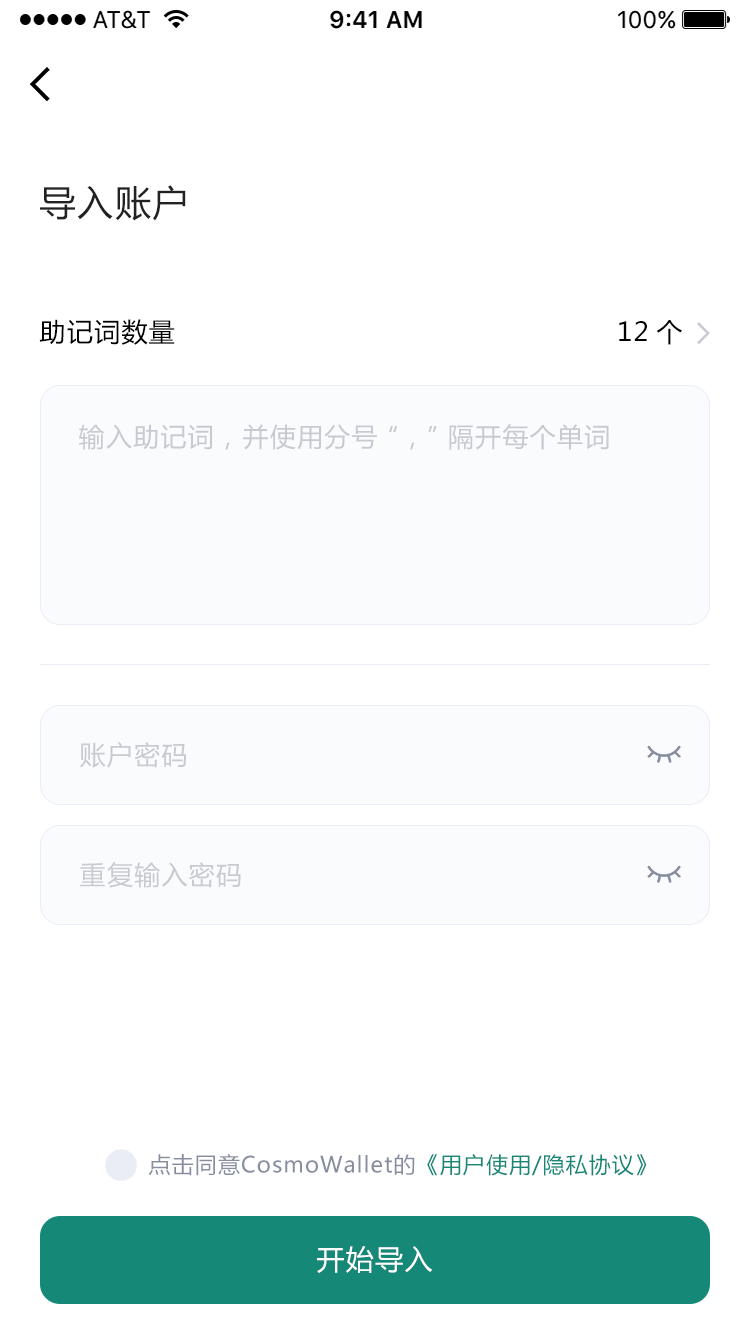
<style>
.page{position:relative;width:750px;height:1334px;background:#ffffff}
.page>*{position:absolute;margin:0}
.t1{font:36px "MicrosoftYaHei";letter-spacing:0.05em;color:#222222}
.t2{font:26px "MicrosoftYaHei";letter-spacing:0.05em;color:#000000}
.t3{font:26px "MicrosoftYaHei";letter-spacing:0.05em;color:#c8cad2}
.t4{font:22px "MicrosoftYaHei";letter-spacing:0.05em;color:#878e9f}
.t5{font:22px "MicrosoftYaHei";letter-spacing:0.05em;color:#158878}
.t6{font:28px "MicrosoftYaHei";letter-spacing:0.05em;color:#ffffff}
</style>
<div class="page">
<p class="t1" style="left:40px;top:185px;width:146px;height:36px">导入账户</p>
<p class="t2" style="left:39px;top:319px;width:136px;height:26px">助记词数量</p>
<p class="t2" style="left:619px;top:320px;width:63px;height:25px">12个</p>
<p class="t3" style="left:79px;top:424px;width:530px;height:26px">输入助记词，并使用分号“，”隔开每个单词</p>
<p class="t3" style="left:80px;top:742px;width:107px;height:26px">账户密码</p>
<p class="t3" style="left:80px;top:862px;width:161px;height:26px">重复输入密码</p>
<p class="t4" style="left:148px;top:1154px;width:499px;height:22px">点击同意CosmoWallet的<span class="t5">《用户使用/隐私协议》</span></p>
<p class="t6" style="left:317px;top:1246px;width:116px;height:27px">开始导入</p>
</div>
